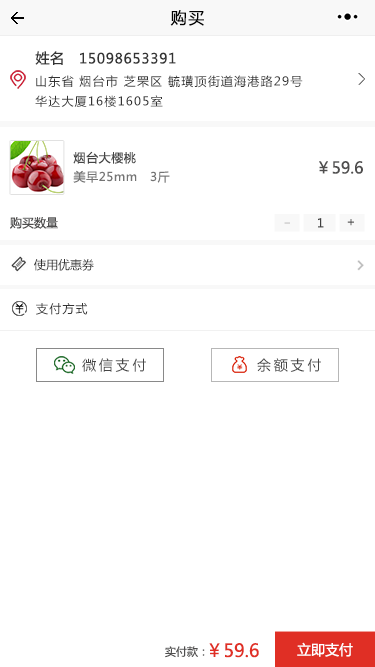
<style>
.page{position:relative;width:375px;height:667px;background:#ffffff}
.page>*{position:absolute;margin:0}
.t1{font:16px "MicrosoftYaHei";letter-spacing:0.1em;color:#020202}
.t2{font:14px "MicrosoftYaHei";letter-spacing:0.05em;color:#333333}
.t3{font:12px/20px "MicrosoftYaHei";letter-spacing:0.1em;color:#333333}
.t4{font:12px "MicrosoftYaHei";letter-spacing:0.05em;color:#454545}
.t5{font:16px "MicrosoftYaHei";color:#4f4e4e}
.t6{font:12px "MicrosoftYaHei";letter-spacing:0.05em;color:#747474}
.t7{font:12px "MicrosoftYaHei";color:#4f4e4e}
.t8{font:12px "MicrosoftYaHei";color:#404040}
.t9{font:12px "MicrosoftYaHei"}
.t10{font:12px "MicrosoftYaHei";color:#333333}
.t11{font:12px "MicrosoftYaHei";letter-spacing:0.1em;color:#333333}
.t12{font:14px "MicrosoftYaHei";letter-spacing:0.2em;color:#454545}
.t13{font:11px "MicrosoftYaHei";color:#4f4e4e}
.t14{font:18px "MicrosoftYaHei";color:#e02f25}
.t15{font:14px "MicrosoftYaHei";color:#ffffff}
</style>
<div class="page">
<p class="t1" style="left:170px;top:10px;width:34px;height:16px">购买</p>
<p class="t2" style="left:35px;top:51px;width:28px;height:14px">姓名</p>
<p class="t2" style="left:80px;top:52px;width:96px;height:12px">15098653391</p>
<p class="t3" style="left:35px;top:75px;width:268px;height:32px">山东省 烟台市 芝罘区 毓璜顶街道海港路29号<br>华达大厦16楼1605室</p>
<p class="t4" style="left:73px;top:151px;width:63px;height:13px">烟台大樱桃</p>
<p class="t5" style="left:319px;top:161px;width:44px;height:13px">￥59.6</p>
<p class="t6" style="left:73px;top:170px;width:97px;height:13px">美早25mm   3斤</p>
<p class="t7" style="left:10px;top:217px;width:48px;height:12px">购买数量</p>
<p class="t8" style="left:318px;top:218px;width:6px;height:10px">1</p>
<p class="t9" style="left:347px;top:219px;width:7px;height:7px">+</p>
<p class="t10" style="left:34px;top:259px;width:60px;height:12px">使用优惠券</p>
<p class="t11" style="left:36px;top:303px;width:52px;height:12px">支付方式</p>
<p class="t12" style="left:82px;top:358px;width:64px;height:14px">微信支付</p>
<p class="t12" style="left:257px;top:358px;width:64px;height:14px">余额支付</p>
<p class="t13" style="left:165px;top:646px;width:40px;height:12px">实付款：</p>
<p class="t14" style="left:209px;top:643px;width:50px;height:15px">￥59.6</p>
<p class="t15" style="left:297px;top:642px;width:56px;height:15px">立即支付</p>
</div>
